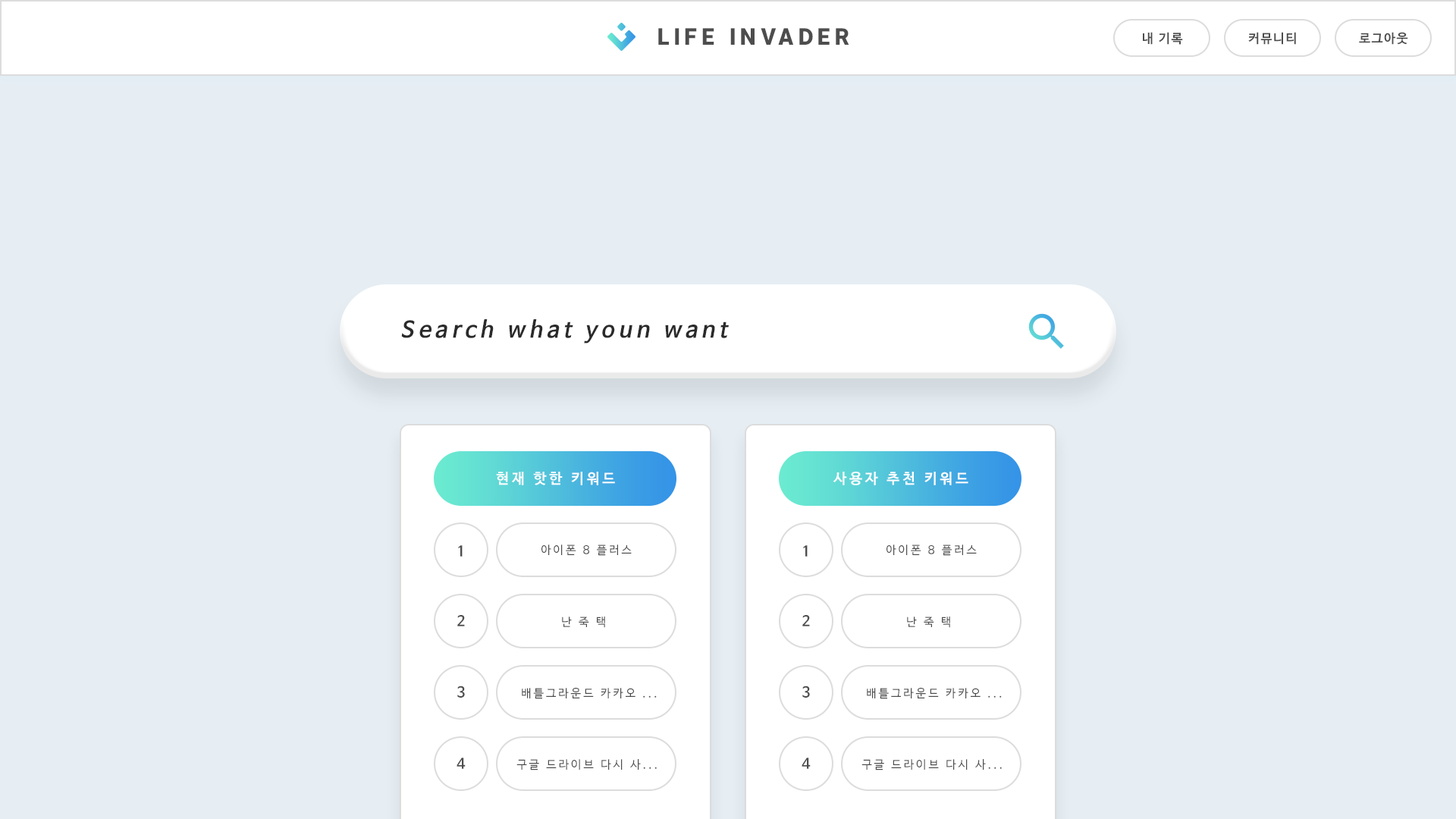
<style>
.page{position:relative;width:1456px;height:819px;background:#e6eef4}
.page>*{position:absolute;margin:0}
.t1{font:22.5px "InterUI-Black";letter-spacing:0.2em;color:#4d4d4d}
.t2{font:12.6px "NanumBarunGothicBold";letter-spacing:0.1em;color:#4d4d4d}
.t3{font:22.3px "NanumBarunGothicBold";letter-spacing:0.2em;color:#2a2a2a;font-style:italic}
.t4{font:14.4px "NanumBarunGothicBold";letter-spacing:0.2em;color:#ffffff}
.t5{font:14.4px "NanumBarunGothicBold";letter-spacing:0.2em;color:#4d4d4d}
.t6{font:11.4px "NanumBarunGothic";letter-spacing:0.2em;color:#4d4d4d}
</style>
<div class="page">
<p class="t1" style="left:658px;top:28px;width:191px;height:17px">LIFE INVADER</p>
<p class="t2" style="left:1143px;top:32px;width:40px;height:13px">내 기록</p>
<p class="t2" style="left:1248px;top:32px;width:48px;height:13px">커뮤니티</p>
<p class="t2" style="left:1359px;top:32px;width:49px;height:13px">로그아웃</p>
<p class="t3" style="left:401px;top:319px;width:328px;height:25px">Search what youn want</p>
<p class="t4" style="left:496px;top:472px;width:119px;height:13px">현재 핫한 키워드</p>
<p class="t4" style="left:833px;top:472px;width:135px;height:13px">사용자 추천 키워드</p>
<p class="t5" style="left:458px;top:545px;width:5px;height:12px">1</p>
<p class="t6" style="left:541px;top:544px;width:91px;height:12px">아이폰 8 플러스</p>
<p class="t5" style="left:803px;top:545px;width:5px;height:12px">1</p>
<p class="t6" style="left:886px;top:544px;width:91px;height:12px">아이폰 8 플러스</p>
<p class="t5" style="left:457px;top:615px;width:8px;height:11px">2</p>
<p class="t6" style="left:562px;top:617px;width:43px;height:11px">난 죽 택</p>
<p class="t5" style="left:802px;top:615px;width:8px;height:11px">2</p>
<p class="t6" style="left:907px;top:617px;width:43px;height:11px">난 죽 택</p>
<p class="t5" style="left:457px;top:686px;width:8px;height:12px">3</p>
<p class="t6" style="left:522px;top:688px;width:135px;height:11px">배틀그라운드 카카오 ...</p>
<p class="t5" style="left:802px;top:686px;width:8px;height:12px">3</p>
<p class="t6" style="left:867px;top:688px;width:135px;height:11px">배틀그라운드 카카오 ...</p>
<p class="t5" style="left:457px;top:758px;width:9px;height:11px">4</p>
<p class="t6" style="left:516px;top:759px;width:141px;height:11px">구글 드라이브 다시 사...</p>
<p class="t5" style="left:802px;top:758px;width:9px;height:11px">4</p>
<p class="t6" style="left:861px;top:759px;width:141px;height:11px">구글 드라이브 다시 사...</p>
</div>
